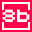
<style>
.page{position:relative;width:32px;height:32px;background:#ff004a}
.page>*{position:absolute;margin:0}
.t1{font:20px "LilliputSteps-Regular";color:#ffffff}
</style>
<div class="page">
<p class="t1" style="left:2px;top:9px;width:28px;height:13px">8b</p>
</div>
